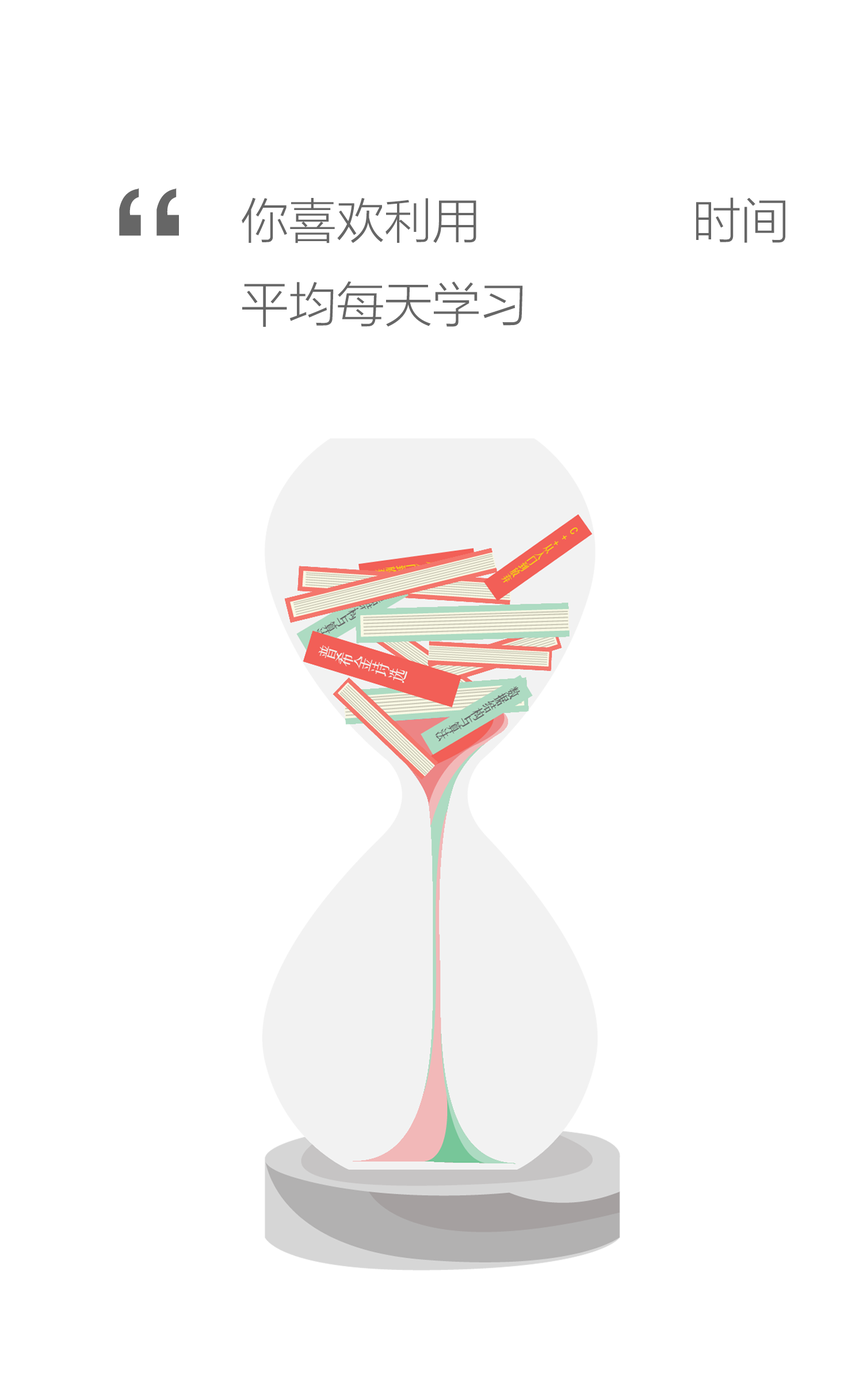
<style>
.page{position:relative;width:863px;height:1381px;background:#ffffff}
.page>*{position:absolute;margin:0}
.t1{font:159.1px "SimHei";color:#666666;scale:1.08 1}
.t2{font:48px "MicrosoftYaHeiLight";color:#666666}
</style>
<div class="page">
<p class="t1" style="left:119px;top:188px;width:60px;height:48px">“</p>
<p class="t2" style="left:242px;top:197px;width:544px;height:130px">你喜欢利用               时间<br>平均每天学习</p>
</div>
